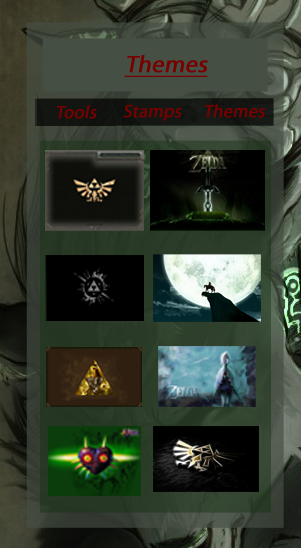
<style>
.page{position:relative;width:301px;height:548px}
.page>*{position:absolute;margin:0}
.t1{font:23.9px "MyriadPro-Regular";color:#790000;font-weight:bold;font-style:italic;text-decoration:underline}
.t2{font:17.9px "MyriadPro-Regular";color:#790000;font-weight:bold;font-style:italic}
</style>
<div class="page">
<p class="t1" style="left:124px;top:55px;width:84px;height:22px">Themes</p>
<p class="t2" style="left:57px;top:105px;width:40px;height:14px">Tools</p>
<p class="t2" style="left:123px;top:104px;width:59px;height:17px">Stamps</p>
<p class="t2" style="left:205px;top:104px;width:61px;height:14px">Themes</p>
</div>
